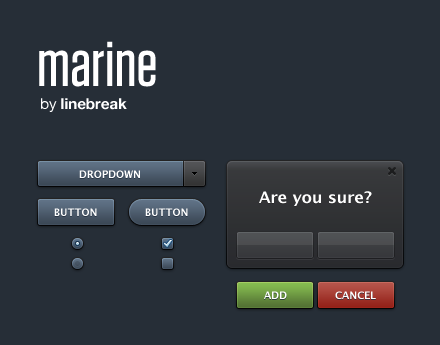
<style>
.page{position:relative;width:440px;height:345px;background:#262e37}
.page>*{position:absolute;margin:0}
.t1{font:10px "LucidaGrande-Bold";color:#ffffff}
.t2{font:16px "LucidaGrande-Bold";color:#ffffff}
</style>
<div class="page">
<p class="t1" style="left:79px;top:170px;width:61px;height:8px">DROPDOWN</p>
<p class="t2" style="left:259px;top:191px;width:113px;height:15px">Are you sure?</p>
<p class="t1" style="left:54px;top:208px;width:43px;height:8px">BUTTON</p>
<p class="t1" style="left:145px;top:208px;width:43px;height:8px">BUTTON</p>
<p class="t1" style="left:264px;top:291px;width:23px;height:8px">ADD</p>
<p class="t1" style="left:335px;top:291px;width:41px;height:8px">CANCEL</p>
</div>
